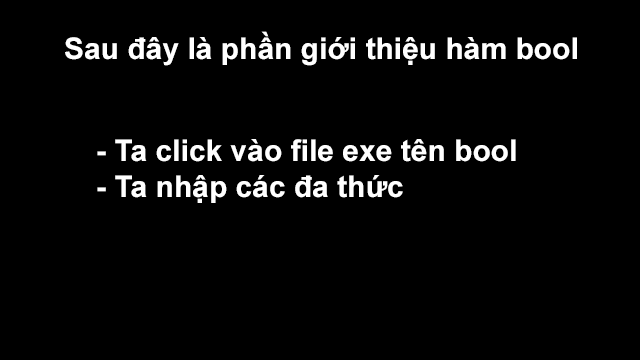
<style>
.page{position:relative;width:640px;height:360px;background:#000000}
.page>*{position:absolute;margin:0}
.t1{font:30px "Arial-BoldMT";color:#ffffff}
</style>
<div class="page">
<p class="t1" style="left:65px;top:31px;width:512px;height:35px">Sau đây là phần giới thiệu hàm bool</p>
<p class="t1" style="left:97px;top:139px;width:419px;height:64px">- Ta click vào file exe tên bool<br>- Ta nhập các đa thức</p>
</div>
